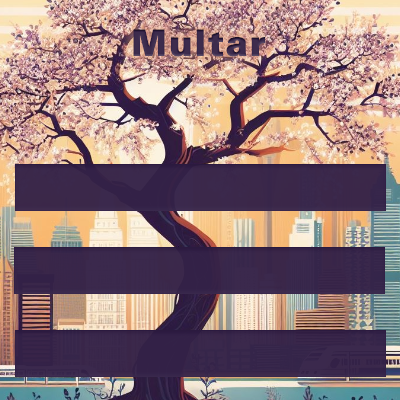
<style>
.page{position:relative;width:400px;height:400px}
.page>*{position:absolute;margin:0}
.t1{font:36px "Univers-Black";letter-spacing:0.05em;color:#2e1c40}
</style>
<div class="page">
<p class="t1" style="left:133px;top:29px;width:133px;height:28px">Multar</p>
</div>
